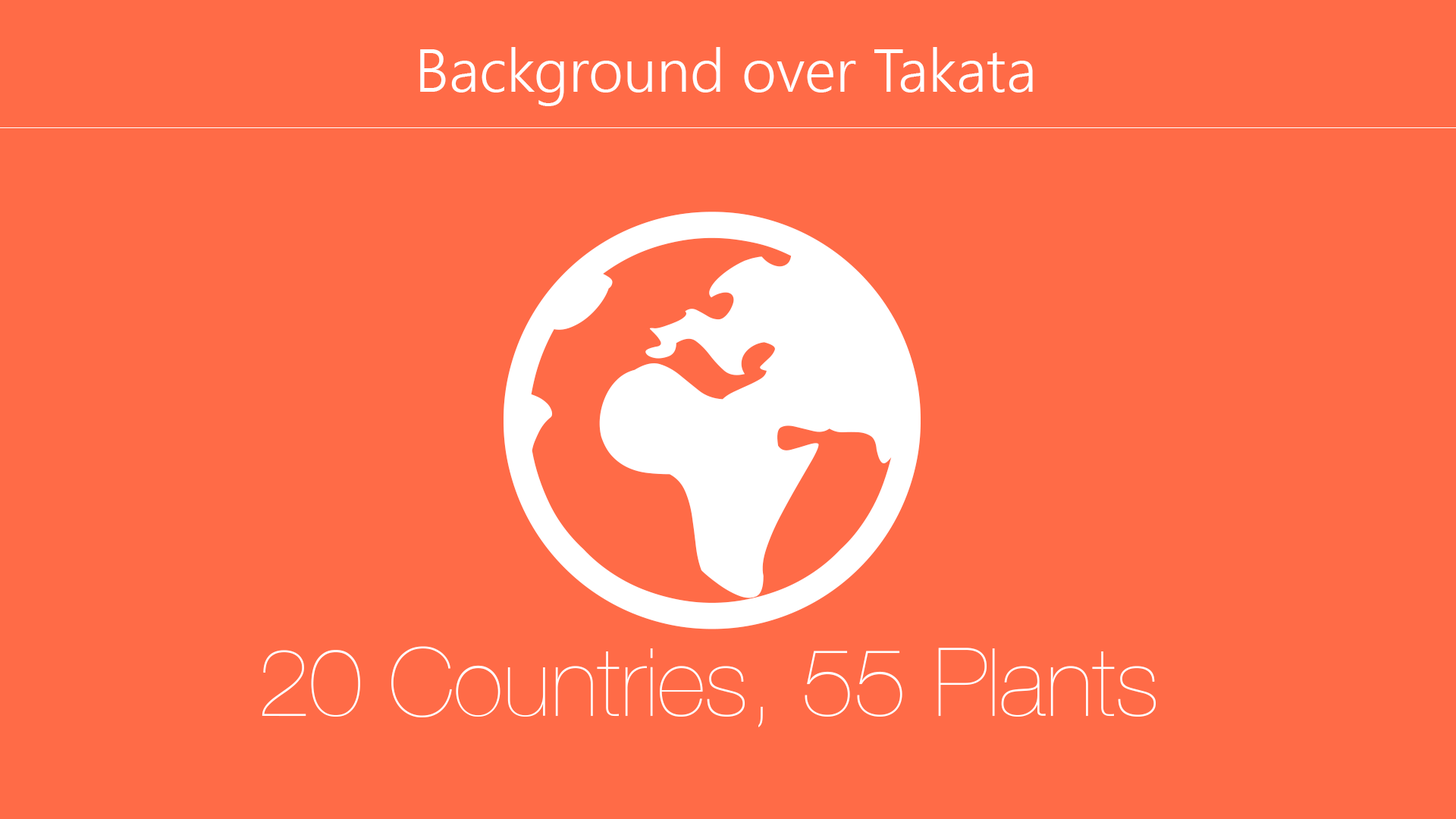
<style>
.page{position:relative;width:1456px;height:819px;background:#ff6b47}
.page>*{position:absolute;margin:0}
.t1{font:60.7px "SegoeUI-Semilight";color:#ffffff}
.t2{font:43.2px "SegoeUI-Semilight";color:#ffffff}
.t3{font:94.8px "HelveticaNeue-UltraLight";color:#ffffff}
</style>
<div class="page">
<p class="t1" style="left:420px;top:47px;width:613px;height:59px"><span class="t2"><br></span><br><br>Background over Takata</p>
<p class="t3" style="left:262px;top:646px;width:894px;height:81px">20 Countries, 55 Plants</p>
</div>
